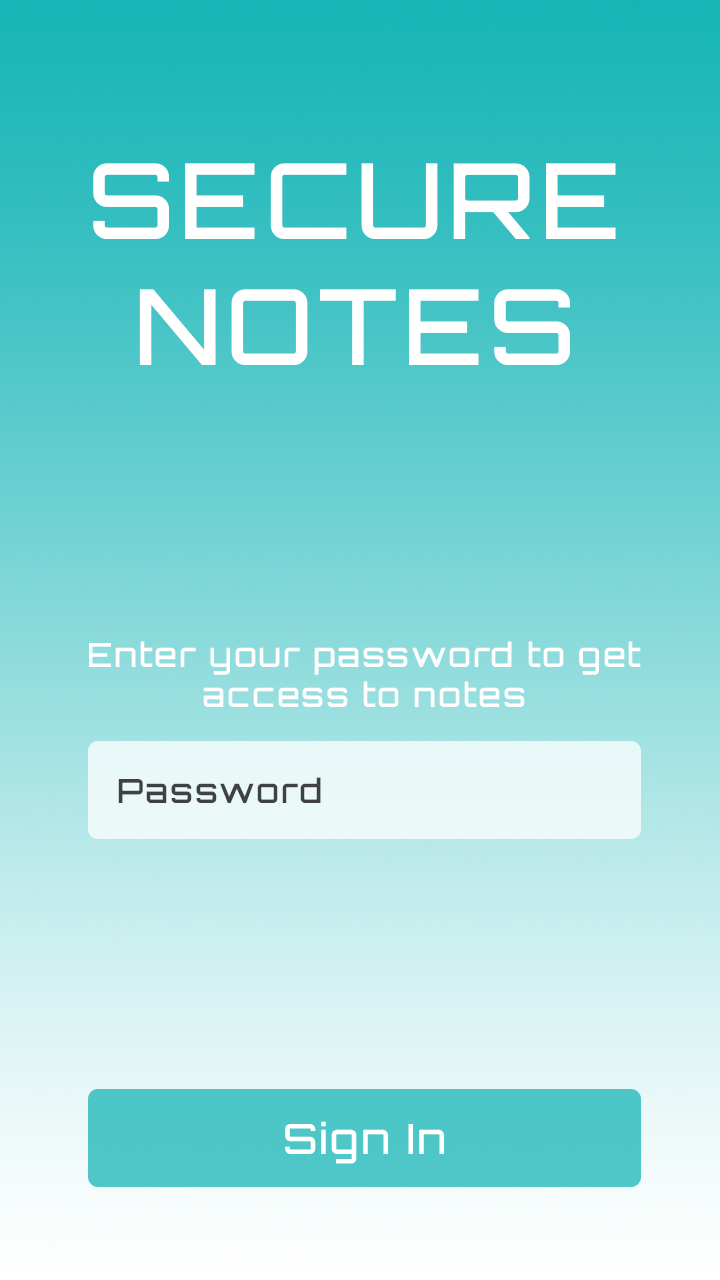
<style>
.page{position:relative;width:720px;height:1280px}
.page>*{position:absolute;margin:0}
.t1{font:104.8px "Orbitron-Medium";letter-spacing:0.05em;color:#ffffff}
.t2{font:33.3px "Orbitron-Medium";letter-spacing:0.05em;color:#ffffff}
.t3{font:33.3px "Orbitron-Medium";letter-spacing:0.05em;color:#303030}
.t4{font:41.7px "Orbitron-Medium";letter-spacing:0.05em;color:#ffffff}
</style>
<div class="page">
<p class="t1" style="left:93px;top:163px;width:523px;height:202px;text-align:center">SECURE<br>NOTES</p>
<p class="t2" style="left:89px;top:641px;width:552px;height:66px;text-align:center">Enter your password to get<br>access to notes</p>
<p class="t3" style="left:118px;top:777px;width:203px;height:26px;opacity:0.95">Password</p>
<p class="t4" style="left:285px;top:1121px;width:159px;height:43px">Sign In</p>
</div>
